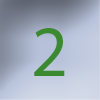
<style>
.page{position:relative;width:100px;height:100px}
.page>*{position:absolute;margin:0}
.t1{font:72px "MyriadPro-Regular";color:#3b8931}
</style>
<div class="page">
<p class="t1" style="left:34px;top:28px;width:31px;height:48px">2</p>
</div>
